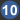
<style>
.page{position:relative;width:20px;height:20px;background:#3b5f97}
.page>*{position:absolute;margin:0}
.t1{font:14px "Arial-BoldMT";letter-spacing:0.025em;color:#fcfdfd}
</style>
<div class="page">
<p class="t1" style="left:2px;top:5px;width:15px;height:11px">10</p>
</div>
